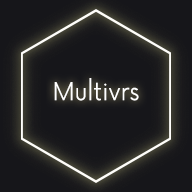
<style>
.page{position:relative;width:192px;height:192px;background:#16161a}
.page>*{position:absolute;margin:0}
.t1{font:24px "Now-Light";color:#ffffff}
</style>
<div class="page">
<p class="t1" style="left:54px;top:78px;width:85px;height:23px">Multivrs</p>
</div>
